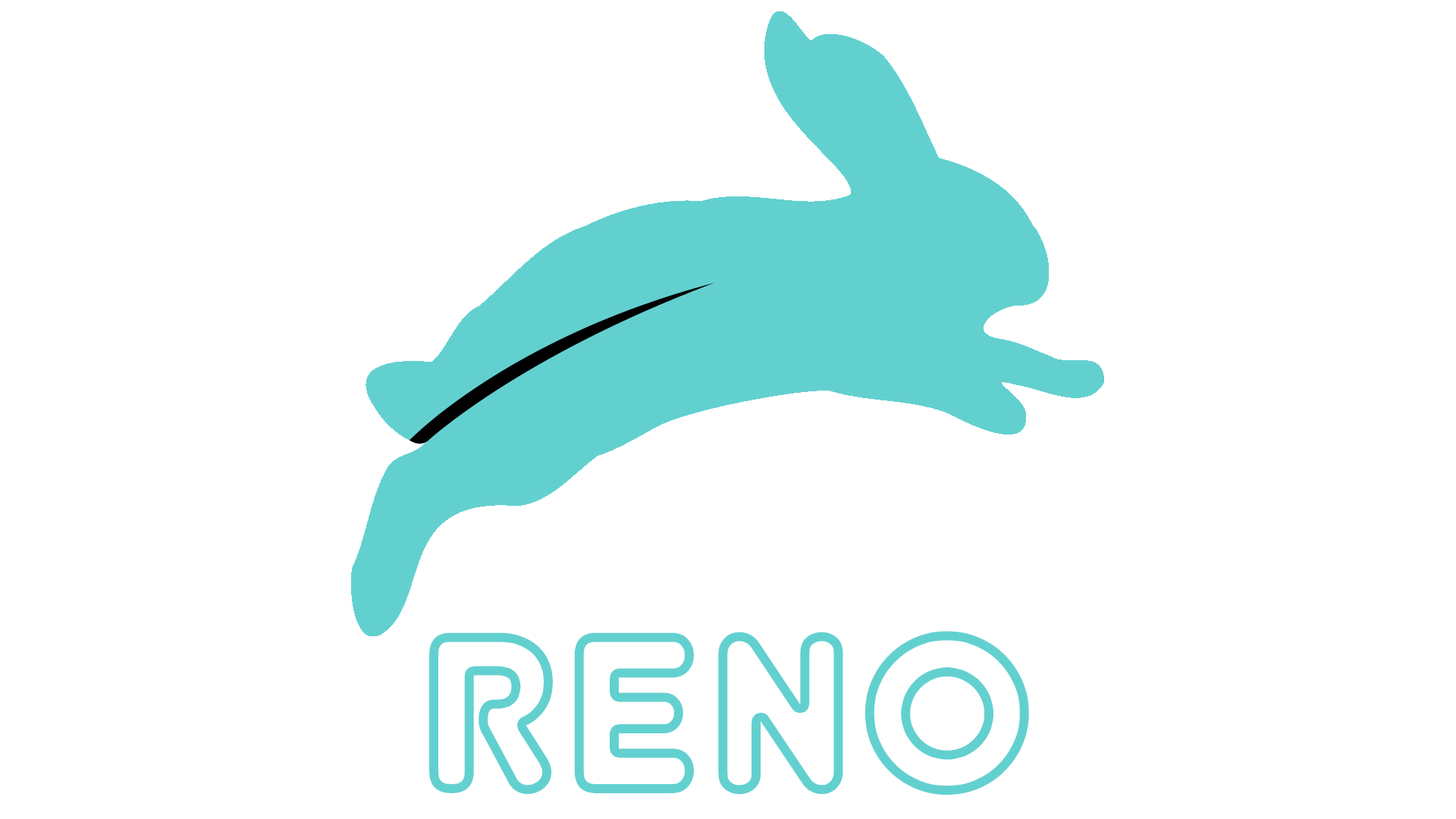
<style>
.page{position:relative;width:1456px;height:819px;background:#ffffff}
.page>*{position:absolute;margin:0}
.t1{font:227.5px "Junegull-Regular";letter-spacing:0.03em}
</style>
<div class="page">
<p class="t1" style="left:429px;top:631px;width:600px;height:164px">RENO</p>
</div>
